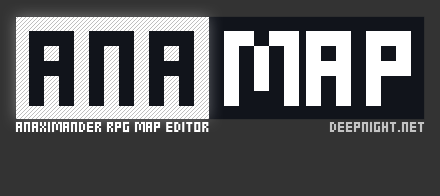
<style>
.page{position:relative;width:440px;height:196px;background:#333333}
.page>*{position:absolute;margin:0}
.t1{font:150px "wendy";color:#11141b}
.t2{font:150px "wendy";color:#ffffff}
.t3{font:20px "wendy";color:#ffffff}
.t4{font:20px "wendy";color:#c3c3c3}
</style>
<div class="page">
<p class="t1" style="left:29px;top:31px;width:165px;height:75px">ANA</p>
<p class="t2" style="left:224px;top:31px;width:187px;height:75px">map</p>
<p class="t3" style="left:15px;top:121px;width:194px;height:12px">Anaximander rpg map editor</p>
<p class="t4" style="left:329px;top:121px;width:96px;height:12px">deepnight.net</p>
</div>
